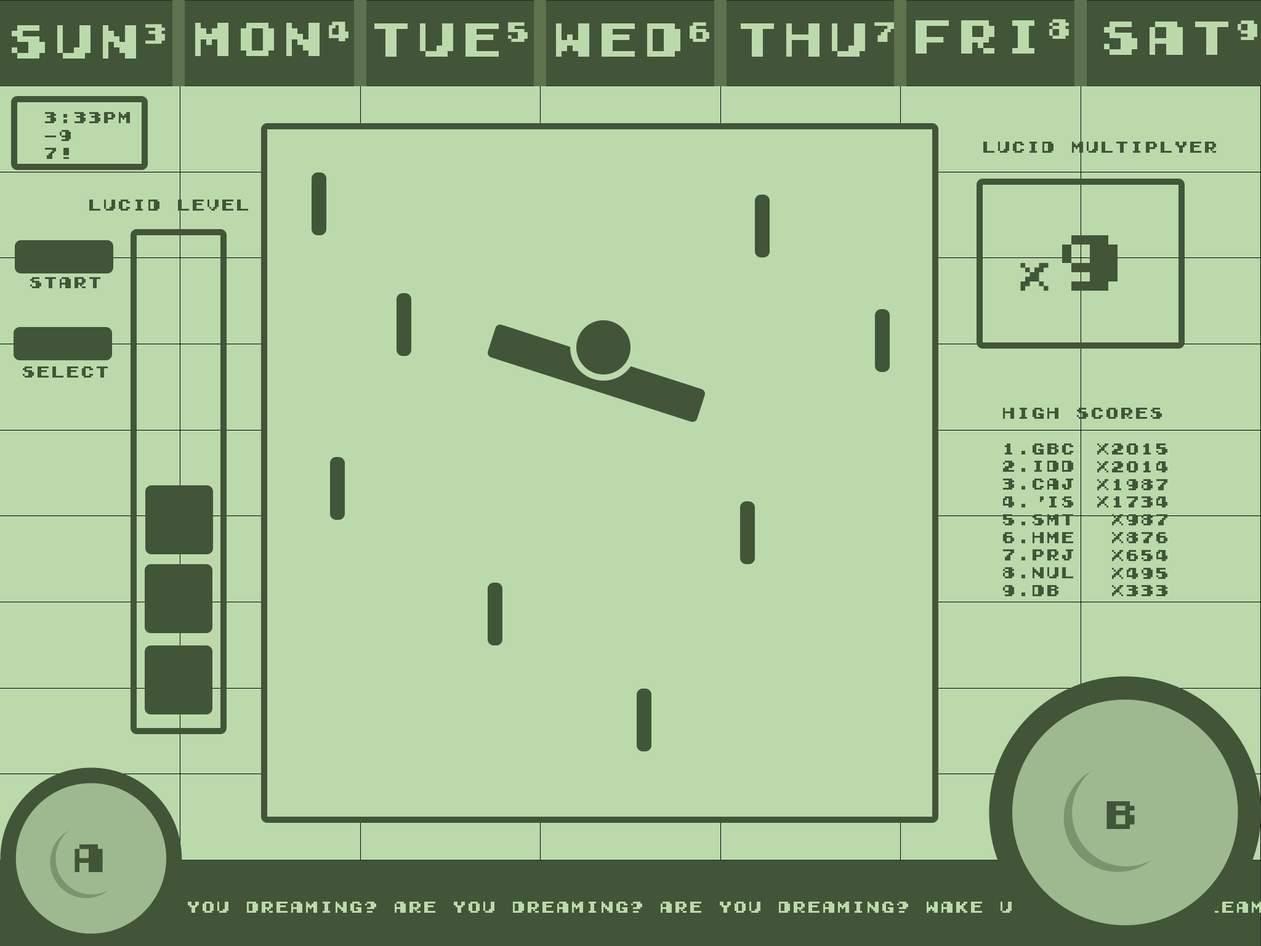
<style>
.page{position:relative;width:1261px;height:946px;background:#bcd9ac}
.page>*{position:absolute;margin:0}
.t1{font:14.8px "GamegirlClassic";color:#425538}
.t2{font:36.9px "GamegirlClassic";color:#425538}
.t3{font:73.9px "GamegirlClassic";color:#425538}
</style>
<div class="page">
<p class="t1" style="left:45px;top:112px;width:85px;height:47px">3:33pm<br>-9<br>7!</p>
<p class="t1" style="left:983px;top:142px;width:233px;height:11px">Lucid multiplyer</p>
<p class="t1" style="left:89px;top:199px;width:159px;height:12px">LUCID LEVEL</p>
<p class="t2" style="left:1020px;top:235px;width:97px;height:56px">x<span class="t3">9</span></p>
<p class="t1" style="left:30px;top:277px;width:70px;height:11px">start</p>
<p class="t1" style="left:23px;top:366px;width:85px;height:11px">select</p>
<p class="t1" style="left:1003px;top:408px;width:159px;height:188px">high scores<br><br>1.gbc<br>2.idd<br>3.caj<br>4.'is<br>5.smt<br>6.hme<br>7.prj<br>8.nul<br>9.db</p>
<p class="t1" style="left:1097px;top:443px;width:70px;height:153px;text-align:right">x2015<br>x2014<br>x1987<br>x1734<br>x987<br>x876<br>x654<br>x495<br>x333</p>
<p class="t2" style="left:1106px;top:801px;width:29px;height:28px">B</p>
<p class="t2" style="left:74px;top:844px;width:29px;height:28px">a</p>
</div>
